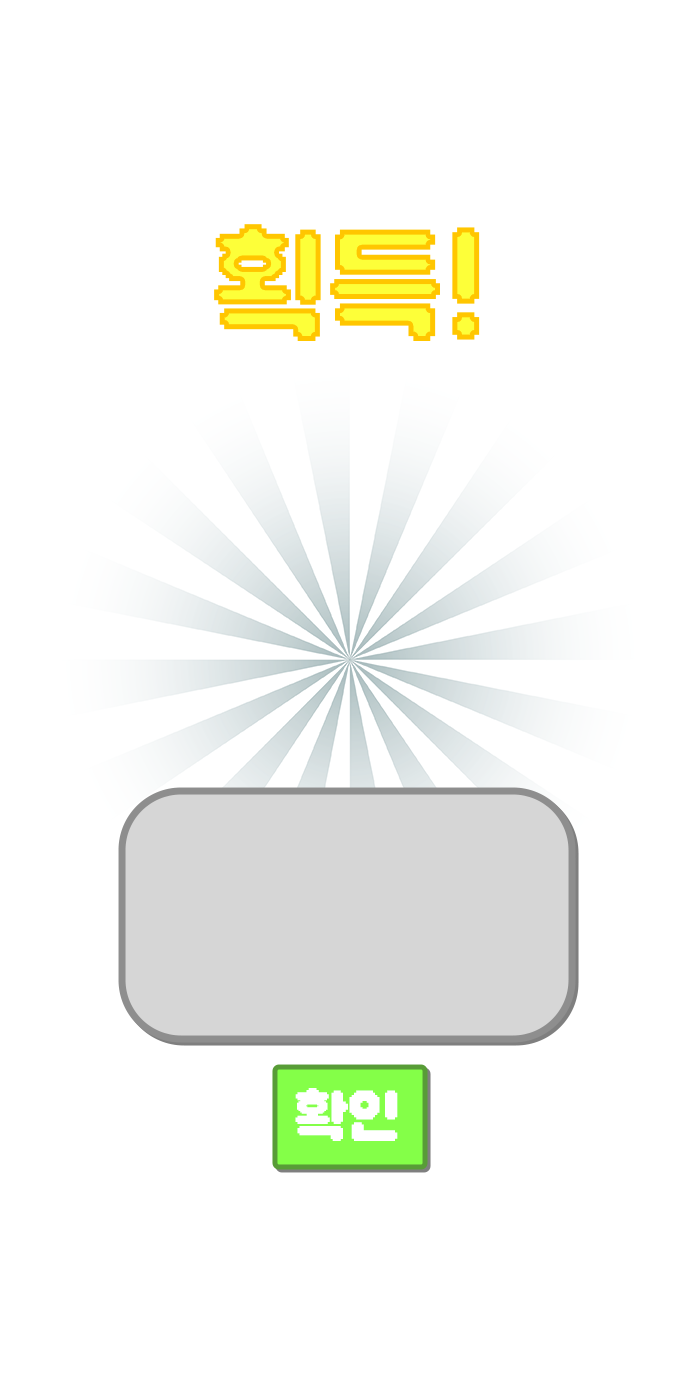
<style>
.page{position:relative;width:700px;height:1400px;background:#ffffff}
.page>*{position:absolute;margin:0}
.t1{font:148.4px "DNFBitBitOTF";letter-spacing:-0.02em}
.t2{font:67.4px "DNFBitBitOTF";letter-spacing:-0.02em;color:#ffffff}
</style>
<div class="page">
<p class="t1" style="left:214px;top:224px;width:266px;height:117px">획득!</p>
<p class="t2" style="left:295px;top:1088px;width:103px;height:53px">확인</p>
</div>
